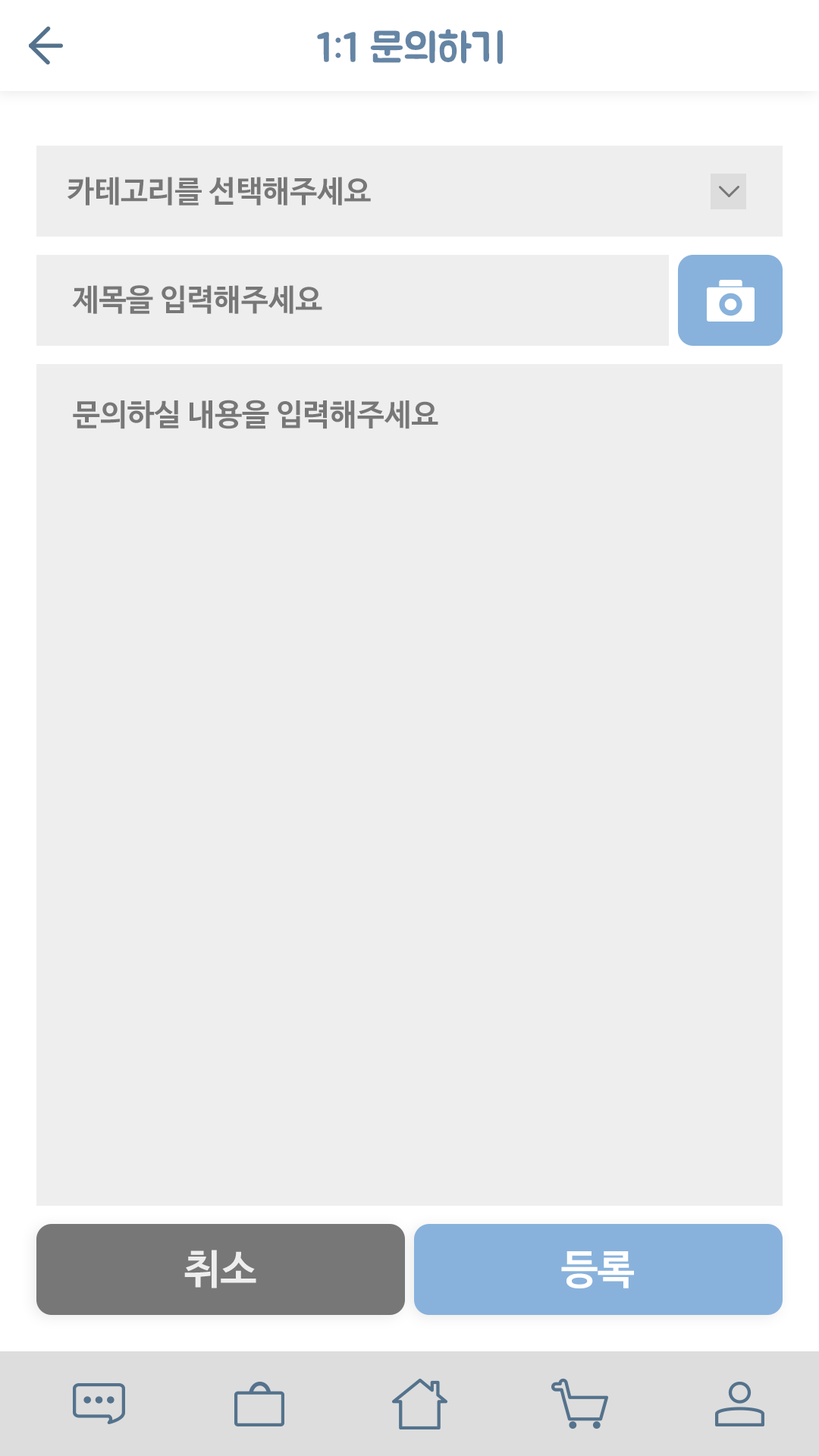
<style>
.page{position:relative;width:819px;height:1456px;background:#eeeeee}
.page>*{position:absolute;margin:0}
.t1{font:40.9px "BMJUA";color:#6585a5}
.t2{font:30.3px "NanumBarunGothicBold";color:#777777}
.t3{font:40.9px "NanumBarunGothicBold";color:#eeeeee}
.t4{font:40.9px "NanumBarunGothicBold";color:#ffffff}
</style>
<div class="page">
<p class="t1" style="left:317px;top:29px;width:186px;height:35px">1:1 문의하기</p>
<p class="t2" style="left:67px;top:177px;width:304px;height:29px">카테고리를 선택해주세요</p>
<p class="t2" style="left:72px;top:285px;width:250px;height:29px">제목을 입력해주세요</p>
<p class="t2" style="left:73px;top:400px;width:365px;height:29px">문의하실 내용을 입력해주세요</p>
<p class="t3" style="left:184px;top:1250px;width:72px;height:38px">취소</p>
<p class="t4" style="left:561px;top:1251px;width:73px;height:37px">등록</p>
</div>
